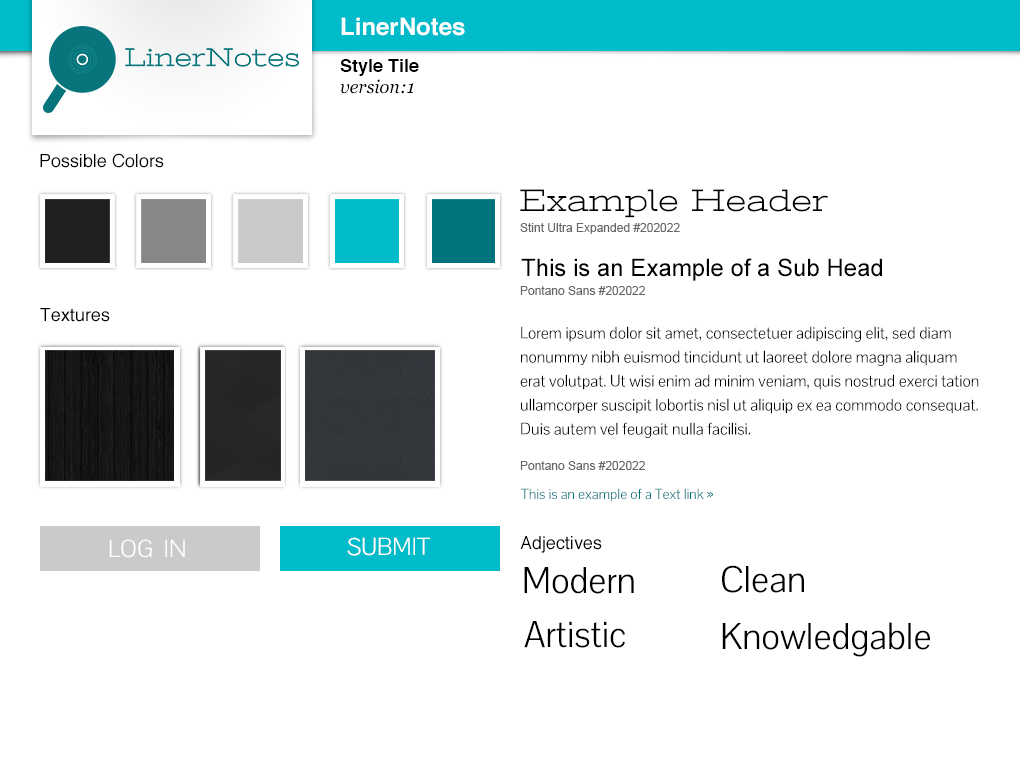
<style>
.page{position:relative;width:1020px;height:760px;background:#ffffff}
.page>*{position:absolute;margin:0}
.t1{font:24px "Helvetica-Bold";color:#ffffff}
.t2{font:18px "Helvetica-Bold";color:#000000}
.t3{font:18px "Georgia-Italic";color:#000000}
.t4{font:18px "Helvetica";color:#000000}
.t5{font:32px "StintUltraExpanded-Regular";color:#000000}
.t6{font:12px "ArialMT";color:#666666}
.t7{font:24px "ArialMT";color:#000000}
.t8{font:16px/24px "PontanoSans-Regular";color:#000000}
.t9{font:14px "PontanoSans-Regular";color:#00747c}
.t10{font:24px "PontanoSans-Regular";color:#ffffff}
.t11{font:36px "PontanoSans-Regular";color:#000000}
</style>
<div class="page">
<p class="t1" style="left:341px;top:17px;width:124px;height:19px">LinerNotes</p>
<p class="t2" style="left:340px;top:59px;width:79px;height:17px">Style Tile</p>
<p class="t3" style="left:340px;top:79px;width:74px;height:15px">version:1</p>
<p class="t4" style="left:40px;top:153px;width:124px;height:15px">Possible Colors</p>
<p class="t5" style="left:520px;top:189px;width:308px;height:29px">Example Header</p>
<p class="t6" style="left:520px;top:223px;width:160px;height:11px">Stint Ultra Expanded #202022</p>
<p class="t7" style="left:521px;top:258px;width:361px;height:23px">This is an Example of a Sub Head</p>
<p class="t6" style="left:520px;top:286px;width:125px;height:9px">Pontano Sans #202022</p>
<p class="t4" style="left:40px;top:308px;width:70px;height:14px">Textures</p>
<p class="t8" style="left:520px;top:326px;width:459px;height:112px">Lorem ipsum dolor sit amet, consectetuer adipiscing elit, sed diam nonummy nibh euismod tincidunt ut laoreet dolore magna aliquam erat volutpat. Ut wisi enim ad minim veniam, quis nostrud exerci tation ullamcorper suscipit lobortis nisl ut aliquip ex ea commodo consequat. Duis autem vel feugait nulla facilisi.</p>
<p class="t6" style="left:520px;top:461px;width:125px;height:9px">Pontano Sans #202022</p>
<p class="t9" style="left:521px;top:488px;width:192px;height:14px">This is an example of a Text link »</p>
<p class="t10" style="left:109px;top:539px;width:76px;height:19px">LOG  IN</p>
<p class="t10" style="left:347px;top:537px;width:83px;height:19px">SUBMIT</p>
<p class="t4" style="left:520px;top:536px;width:82px;height:17px">Adjectives</p>
<p class="t11" style="left:524px;top:567px;width:110px;height:27px">Modern</p>
<p class="t11" style="left:722px;top:565px;width:82px;height:28px">Clean</p>
<p class="t11" style="left:524px;top:621px;width:101px;height:27px">Artistic</p>
<p class="t11" style="left:722px;top:622px;width:208px;height:35px">Knowledgable</p>
</div>
